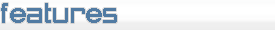
<style>
.page{position:relative;width:275px;height:30px}
.page>*{position:absolute;margin:0}
.t1{font:26px "Zeroes";color:#517ba3}
</style>
<div class="page">
<p class="t1" style="left:1px;top:3px;width:116px;height:20px">features</p>
</div>
